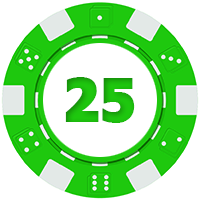
<style>
.page{position:relative;width:200px;height:200px;background:#ffffff}
.page>*{position:absolute;margin:0}
.t1{font:60px "VerdanaPro-CondBlack";color:#1ec80e}
</style>
<div class="page">
<p class="t1" style="left:65px;top:77px;width:70px;height:46px">25</p>
</div>
